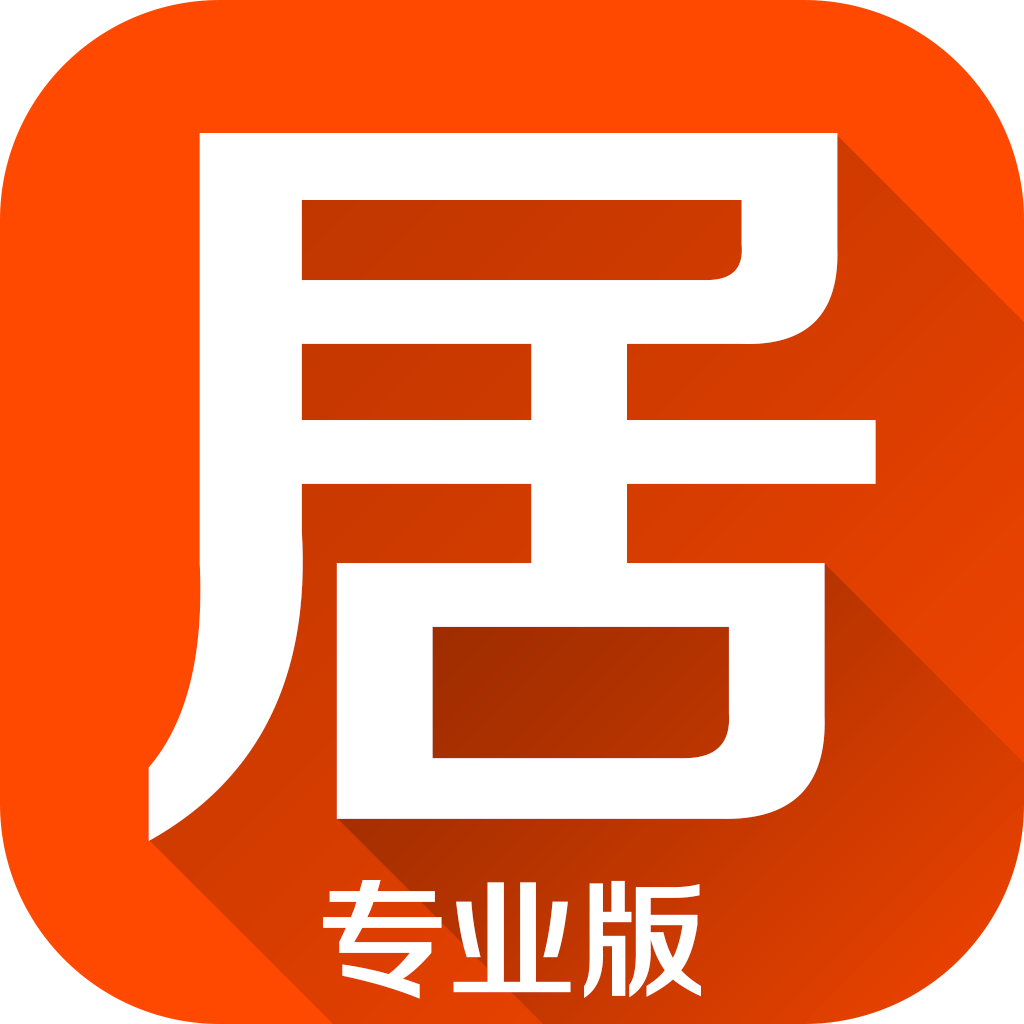
<style>
.page{position:relative;width:1024px;height:1024px;background:#ffffff}
.page>*{position:absolute;margin:0}
.t1{font:816px "FZZZHONGJW--GB1-0";color:#ffffff}
.t2{font:130px "FZZZHONGJW--GB1-0";color:#ffffff}
</style>
<div class="page">
<p class="t1" style="left:148px;top:133px;width:728px;height:708px">居</p>
<p class="t2" style="left:323px;top:880px;width:378px;height:119px">专业版</p>
</div>
